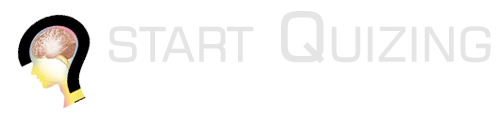
<style>
.page{position:relative;width:500px;height:120px;background:#ffffff}
.page>*{position:absolute;margin:0}
.t1{font:69.1px "BPGExtraSquareMtavruli";color:#e5e5e5;font-variant:small-caps}
</style>
<div class="page">
<p class="t1" style="left:109px;top:11px;width:382px;height:53px">start Quizing</p>
</div>
